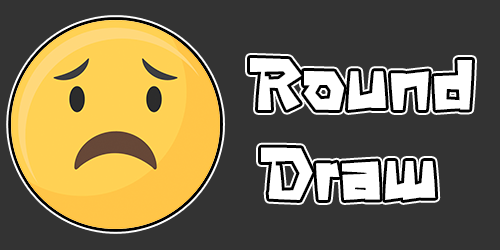
<style>
.page{position:relative;width:500px;height:250px;background:#333333}
.page>*{position:absolute;margin:0}
.t1{font:75px "SUPERGAME";color:#ffffff}
</style>
<div class="page">
<p class="t1" style="left:250px;top:58px;width:222px;height:142px">Round<br> Draw</p>
</div>
